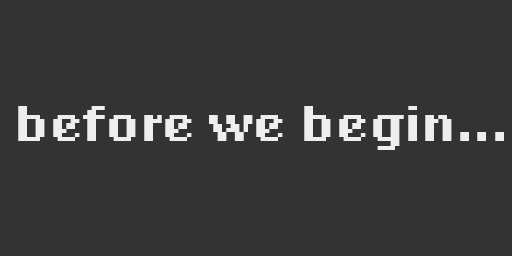
<style>
.page{position:relative;width:512px;height:256px;background:#333333}
.page>*{position:absolute;margin:0}
.t1{font:52px "LoRes12OT-Bold";color:#eeeeee}
</style>
<div class="page">
<p class="t1" style="left:18px;top:106px;width:486px;height:44px">before we begin...</p>
</div>
